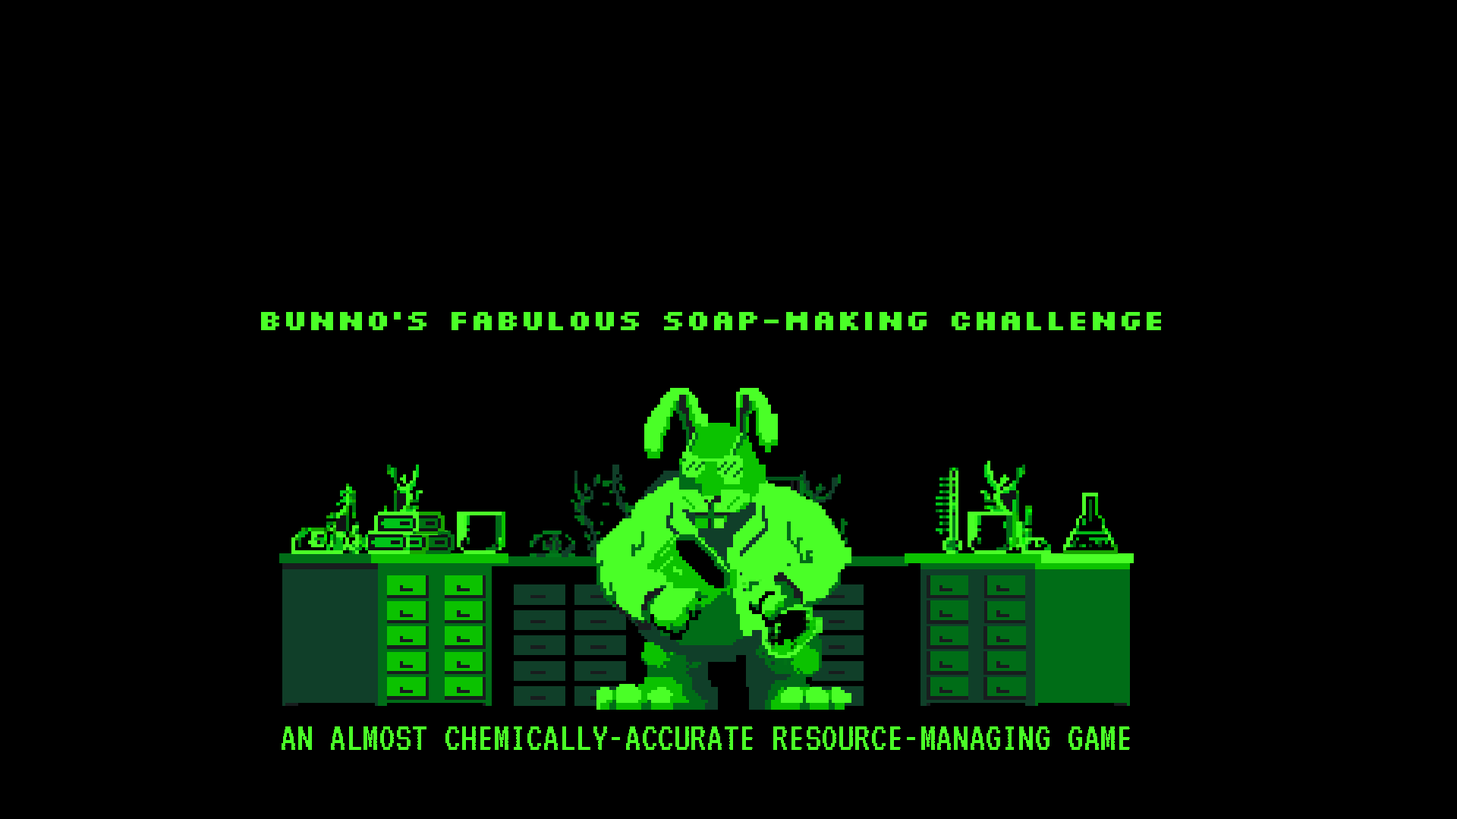
<style>
.page{position:relative;width:1457px;height:819px;background:#000000}
.page>*{position:absolute;margin:0}
.t1{font:30.3px "Silkscreen-Bold";color:#4aff27}
.t2{font:41px "VT323-Regular";color:#4aff27}
</style>
<div class="page">
<p class="t1" style="left:261px;top:312px;width:900px;height:18px">Bunno's Fabulous Soap-Making Challenge</p>
<p class="t2" style="left:281px;top:726px;width:849px;height:24px">AN ALMOST CHEMICALLY-ACCURATE RESOURCE-MANAGING GAME</p>
</div>
